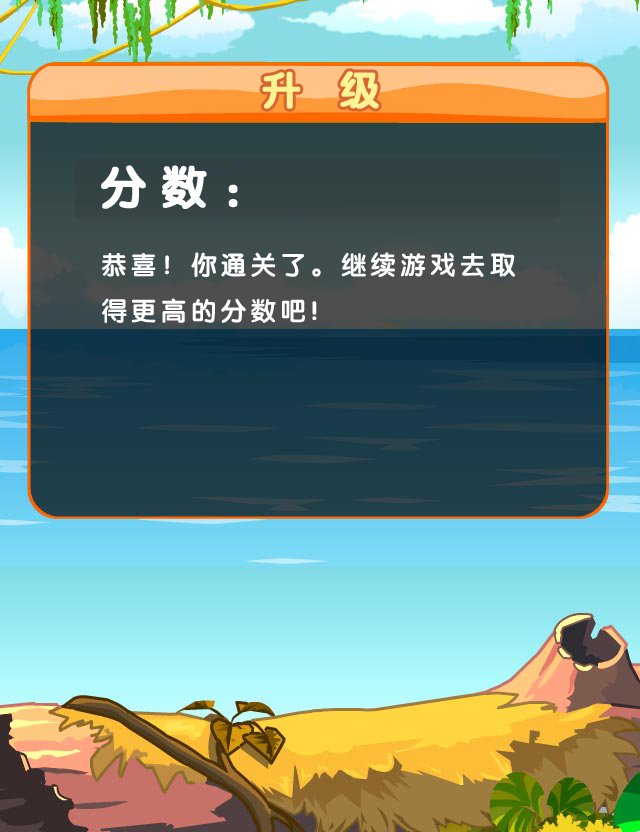
<style>
.page{position:relative;width:640px;height:832px}
.page>*{position:absolute;margin:0}
.t1{font:40px "JCuYuan";letter-spacing:0.3em;color:#fff495;font-weight:bold}
.t2{font:46px "JCuYuan";letter-spacing:0.3em;color:#ffffff;font-weight:bold}
.t3{font:26px "JCuYuan";letter-spacing:0.15em;color:#ffffff}
</style>
<div class="page">
<p class="t1" style="left:262px;top:71px;width:117px;height:38px">升 级</p>
<p class="t2" style="left:101px;top:165px;width:137px;height:44px">分数：</p>
<p class="t3" style="left:102px;top:252px;width:413px;height:71px">恭喜！你通关了。继续游戏去取<br>得更高的分数吧!</p>
</div>
